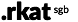
<style>
.page{position:relative;width:78px;height:22px;background:#ffffff}
.page>*{position:absolute;margin:0}
.t1{font:24px "Lato-Black";color:#000000}
.t2{font:10px "Lato-Regular";color:#000000}
</style>
<div class="page">
<p class="t1" style="left:1px;top:1px;width:50px;height:20px">.rkat</p>
<p class="t2" style="left:54px;top:5px;width:15px;height:10px">sgb</p>
</div>
